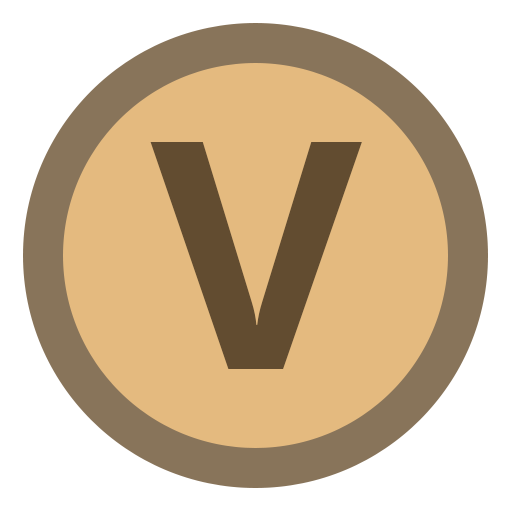
<style>
.page{position:relative;width:512px;height:512px;background:#e4ba7f}
.page>*{position:absolute;margin:0}
.t1{font:300px "MicrosoftYaHei-Bold";color:#624c30}
</style>
<div class="page">
<p class="t1" style="left:150px;top:142px;width:212px;height:227px">V</p>
</div>
